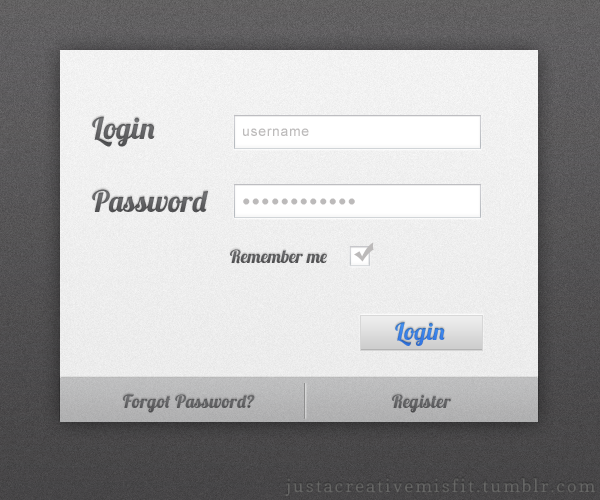
<style>
.page{position:relative;width:600px;height:500px}
.page>*{position:absolute;margin:0}
.t1{font:30px "Lobster1.3";letter-spacing:0.01em;color:#616163}
.t2{font:14px "ArialMT";letter-spacing:0.05em;color:#bcbaba}
.t3{font:30px "Lobster1.3";letter-spacing:0.01em;color:#5b5b5d}
.t4{font:24px "ArialMT";letter-spacing:0.05em;color:#bcbaba}
.t5{font:18px "Lobster1.3";letter-spacing:0.01em;color:#595a5b}
.t6{font:24px "Lobster1.3";letter-spacing:0.01em;color:#377de3}
.t7{font:18px "Lobster1.3";letter-spacing:0.025em;color:#5f6062}
.t8{font:18px "Lobster1.3";letter-spacing:0.025em;color:#5f5f61}
.t9{font:18px "Copse";letter-spacing:0.1em;color:#646463}
</style>
<div class="page">
<p class="t1" style="left:92px;top:116px;width:63px;height:31px">Login</p>
<p class="t2" style="left:243px;top:128px;width:66px;height:8px">username</p>
<p class="t3" style="left:92px;top:189px;width:116px;height:24px">Password</p>
<p class="t4" style="left:243px;top:198px;width:112px;height:7px">••••••••••••</p>
<p class="t5" style="left:230px;top:249px;width:97px;height:15px">Remember me</p>
<p class="t6" style="left:395px;top:322px;width:50px;height:24px">Login</p>
<p class="t7" style="left:123px;top:394px;width:132px;height:19px">Forgot Password?</p>
<p class="t8" style="left:392px;top:394px;width:59px;height:19px">Register</p>
<p class="t9" style="left:285px;top:478px;width:311px;height:18px">justacreativemisfit.tumblr.com</p>
</div>
